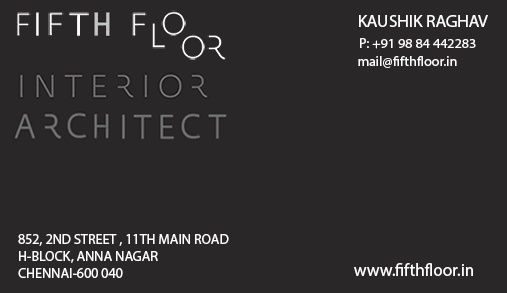
<style>
.page{position:relative;width:507px;height:293px;background:#292728}
.page>*{position:absolute;margin:0}
.t1{font:17px "MyriadPro-Regular";color:#ffffff;text-transform:uppercase;scale:1.03 1}
.t2{font:13.8px "MyriadPro-Regular";color:#ffffff}
.t3{font:14px "MyriadPro-Regular";color:#ffffff}
.t4{font:18px "MyriadPro-Regular";color:#ffffff}
.t5{font:17.5px "MyriadPro-Regular";color:#ffffff}
</style>
<div class="page">
<p class="t1" style="left:359px;top:15px;width:129px;height:12px">Kaushik raghav</p>
<p class="t2" style="left:360px;top:38px;width:116px;height:11px">P: +91 98 84 442283</p>
<p class="t3" style="left:358px;top:56px;width:99px;height:12px"><span class="t4"><br></span>mail@fifthfloor.in</p>
<p class="t3" style="left:18px;top:234px;width:211px;height:44px">852, 2ND STREET , 11TH MAIN ROAD<br>H-BLOCK, ANNA NAGAR<br>CHENNAI-600 040</p>
<p class="t5" style="left:354px;top:263px;width:119px;height:13px">www.fifthfloor.in</p>
</div>
